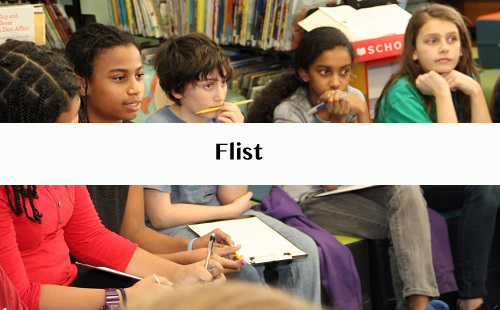
<style>
.page{position:relative;width:500px;height:310px;background:#fbfdfb}
.page>*{position:absolute;margin:0}
.t1{font:24px "TeluguMN-Bold";color:#020202}
</style>
<div class="page">
<p class="t1" style="left:216px;top:142px;width:47px;height:18px">Flist</p>
</div>
